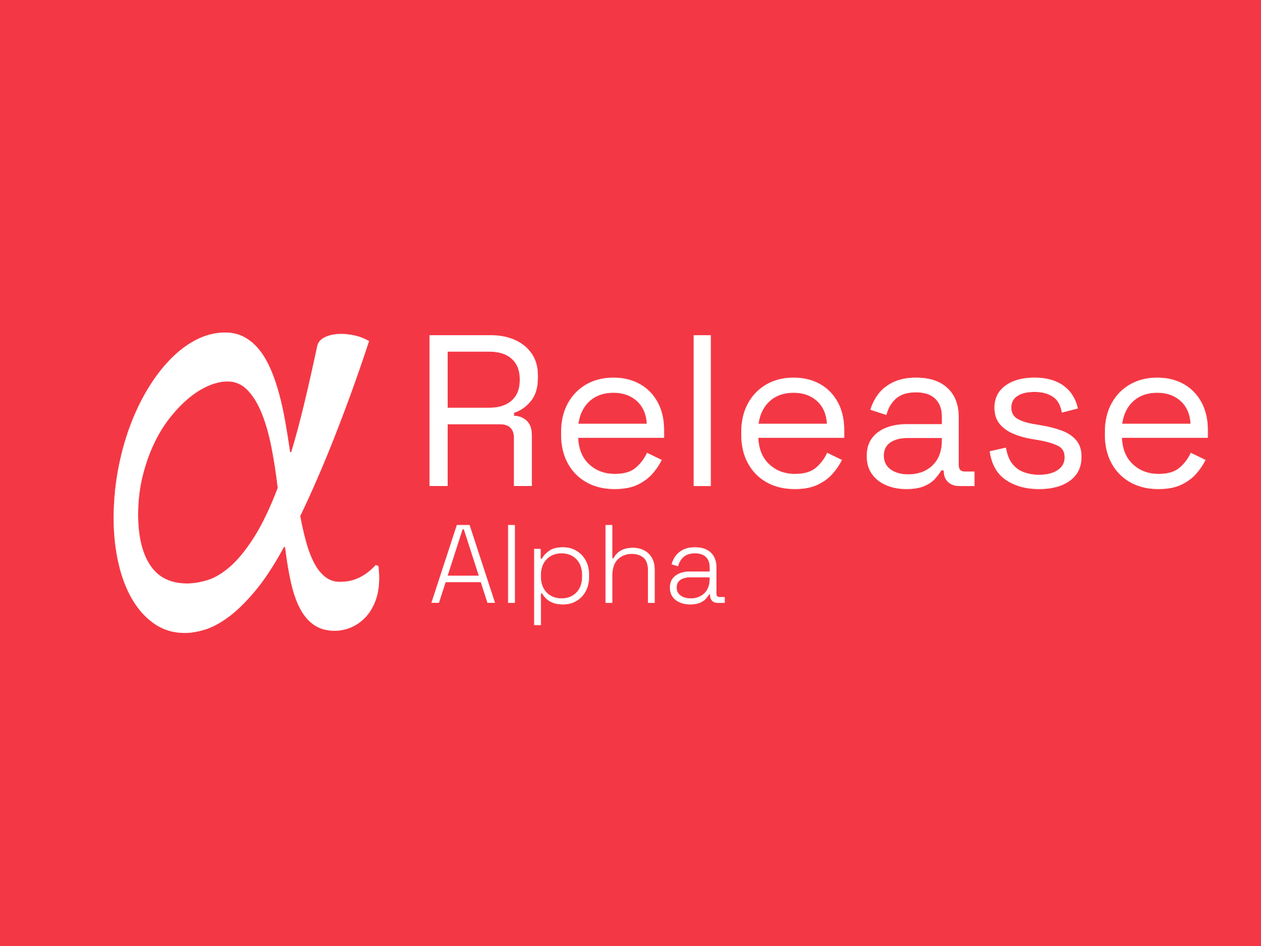
<style>
.page{position:relative;width:1261px;height:946px;background:#f43744}
.page>*{position:absolute;margin:0}
.t1{font:812.5px "Gabriola";color:#ffffff}
.t2{font:215.3px "SpaceGrotesk-Regular";color:#ffffff}
.t3{font:111.1px "SpaceGrotesk-Light";color:#ffffff}
</style>
<div class="page">
<p class="t1" style="left:113px;top:332px;width:267px;height:301px">α</p>
<p class="t2" style="left:429px;top:335px;width:779px;height:154px">Release</p>
<p class="t3" style="left:431px;top:524px;width:294px;height:101px">Alpha</p>
</div>
